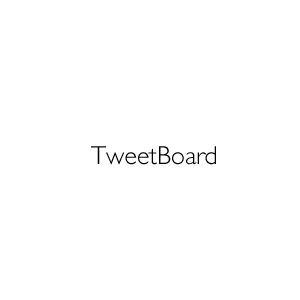
<style>
.page{position:relative;width:300px;height:300px;background:#ffffff}
.page>*{position:absolute;margin:0}
.t1{font:26px "GillSans-Light";color:#000000}
</style>
<div class="page">
<p class="t1" style="left:91px;top:146px;width:125px;height:19px">TweetBoard</p>
</div>
